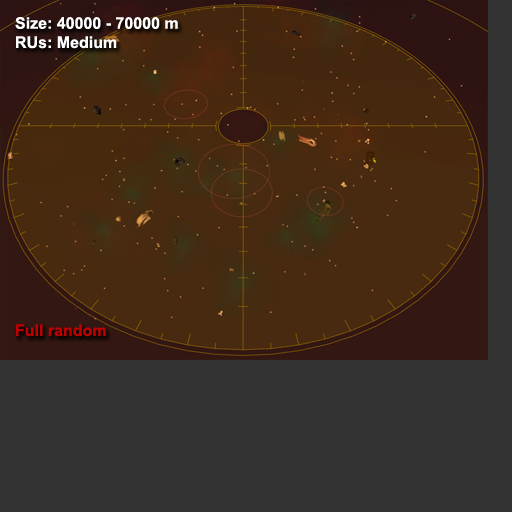
<style>
.page{position:relative;width:512px;height:512px;background:#333333}
.page>*{position:absolute;margin:0}
.t1{font:16px "Arial-BoldMT";color:#ffffff}
.t2{font:16px "Arial-BoldMT";color:#be0000}
</style>
<div class="page">
<p class="t1" style="left:15px;top:17px;width:163px;height:320px">Size: 40000 - 70000 m<br>RUs: Medium<br><br><br><br><br><br><br><br><br><br><br><br><br><br><br><span class="t2">Full random</span></p>
</div>
